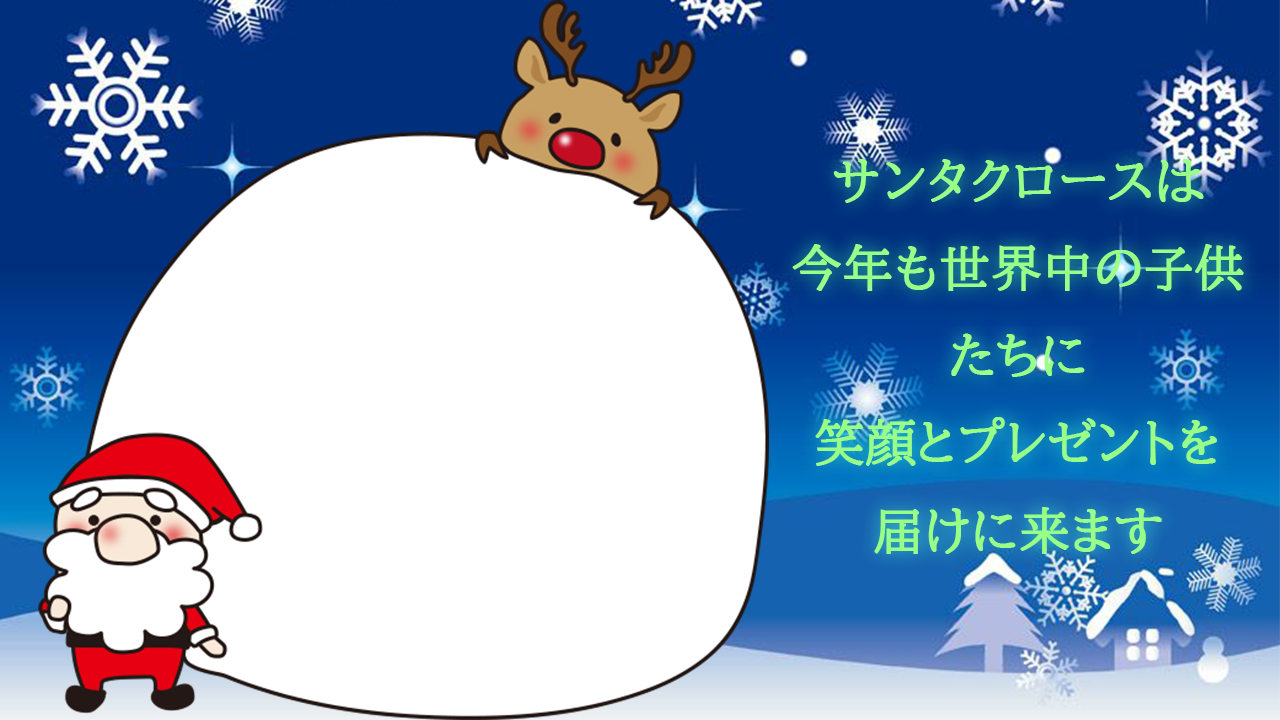
<style>
.page{position:relative;width:1280px;height:720px;background:#ffffff}
.page>*{position:absolute;margin:0}
.t1{font:12px "BIZ-UDPMincho-Medium";color:#98ff87;font-weight:bold}
</style>
<div class="page">
<p class="t1" style="left:792px;top:159px;width:452px;height:395px;text-align:center">サンタクロースは<br>今年も世界中の子供たちに<br>笑顔とプレゼントを<br>届けに来ます</p>
</div>
